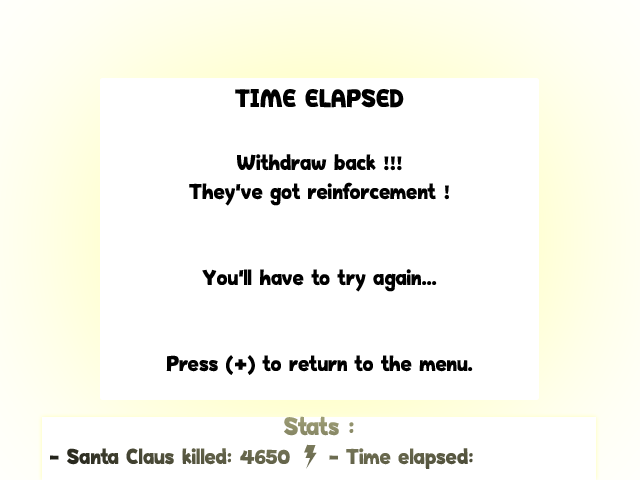
<style>
.page{position:relative;width:640px;height:480px;background:#ffffff}
.page>*{position:absolute;margin:0}
.t1{font:24px "HappyHell";color:#000000}
.t2{font:28px "HappyHell";color:#000000}
.t3{font:24px "HappyHell"}
.t4{font:28px "HappyHell"}
</style>
<div class="page">
<p class="t1" style="left:166px;top:89px;width:307px;height:286px;text-align:center"><span class="t2">TIME ELAPSED<br><br></span>Withdraw back !!!<br>They've got reinforcement !<br><br><br>You'll have to try again...<br><br><br>Press (+) to return to the menu.</p>
<p class="t3" style="left:50px;top:416px;width:423px;height:53px;text-align:center"><span class="t4">Stats :<br></span> - Santa Claus killed: 4650 | - Time elapsed:</p>
</div>
